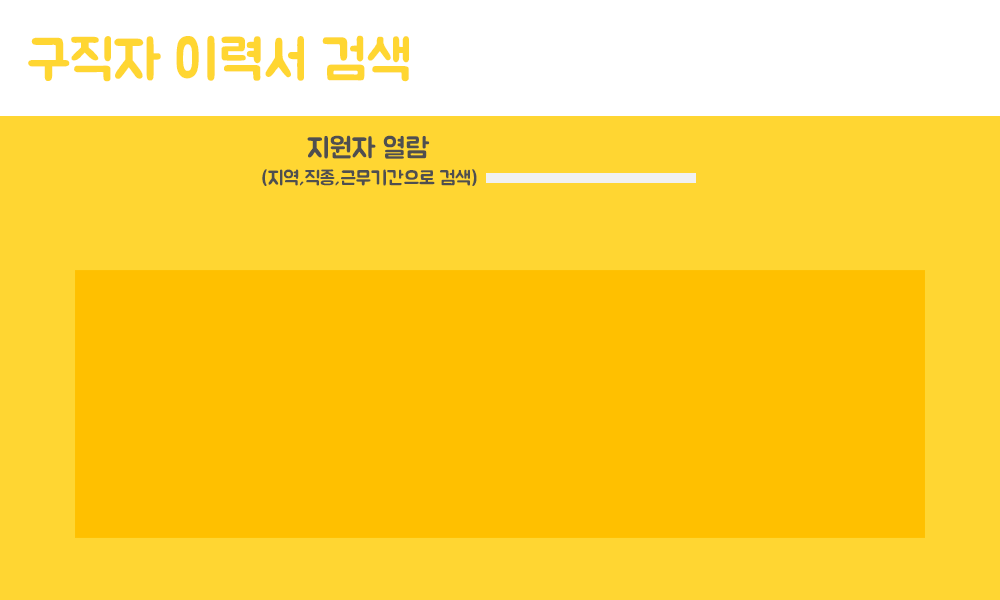
<style>
.page{position:relative;width:1000px;height:600px;background:#ffd632}
.page>*{position:absolute;margin:0}
.t1{font:55.6px "BMJUA";color:#ffd632}
.t2{font:27.8px "BMJUA";color:#4f4f4f}
.t3{font:19.4px "BMJUA";color:#4f4f4f}
</style>
<div class="page">
<p class="t1" style="left:28px;top:35px;width:381px;height:47px">구직자 이력서 검색</p>
<p class="t2" style="left:307px;top:135px;width:123px;height:24px">지원자 열람</p>
<p class="t3" style="left:262px;top:169px;width:215px;height:17px">(지역,직종,근무기간으로 검색)</p>
</div>
